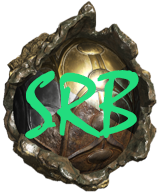
<style>
.page{position:relative;width:157px;height:192px;background:#ffffff}
.page>*{position:absolute;margin:0}
.t1{font:90.5px "Mistral";color:#22dc7e}
</style>
<div class="page">
<p class="t1" style="left:25px;top:70px;width:114px;height:69px;rotate:-2deg">SRB</p>
</div>
